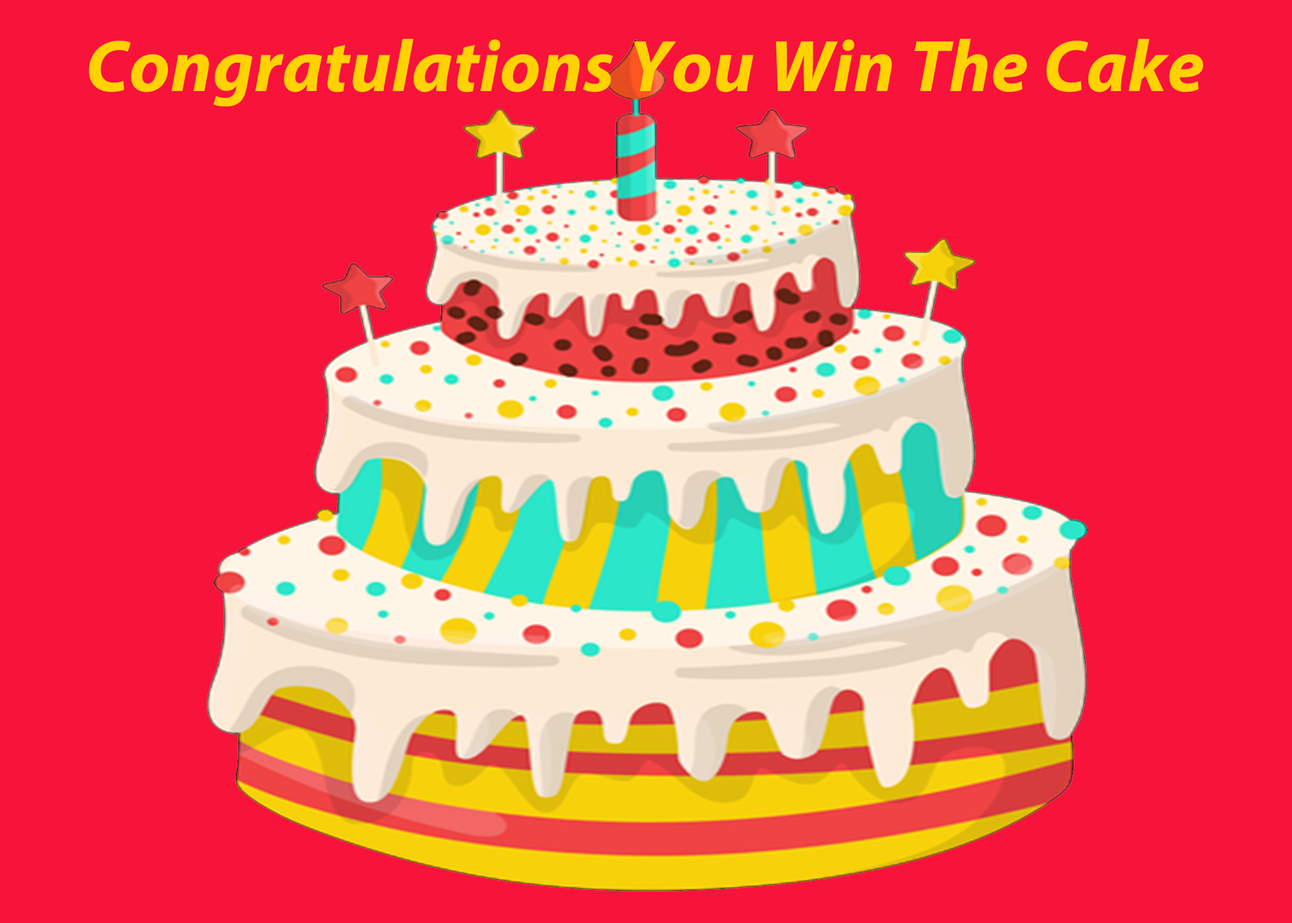
<style>
.page{position:relative;width:1292px;height:923px;background:#f8133a}
.page>*{position:absolute;margin:0}
.t1{font:73.4px "MyriadPro-BoldIt";letter-spacing:0.01em;color:#ffd200}
</style>
<div class="page">
<p class="t1" style="left:89px;top:39px;width:1114px;height:67px">Congratulations You Win The Cake</p>
</div>
